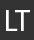
<style>
.page{position:relative;width:34px;height:40px;background:#333333}
.page>*{position:absolute;margin:0}
.t1{font:30px "MyriadPro-Regular";color:#ffffff}
</style>
<div class="page">
<p class="t1" style="left:6px;top:10px;width:24px;height:21px">LT</p>
</div>
